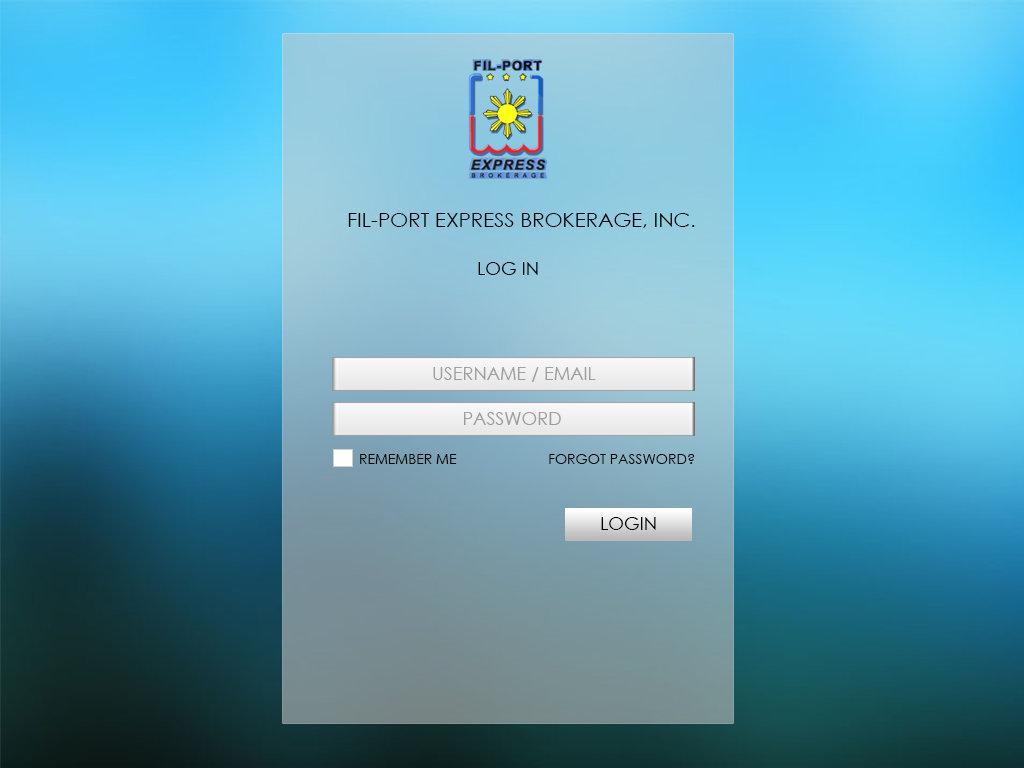
<style>
.page{position:relative;width:1024px;height:768px}
.page>*{position:absolute;margin:0}
.t1{font:20.3px "CenturyGothic";color:#000000;text-transform:uppercase}
.t2{font:18px "CenturyGothic";color:#000000;text-transform:uppercase}
.t3{font:18px "CenturyGothic";color:#9f9f9f;text-transform:uppercase}
.t4{font:18px "CenturyGothic";color:#9d9d9d;text-transform:uppercase}
.t5{font:14px "CenturyGothic";color:#000000;text-transform:uppercase}
</style>
<div class="page">
<p class="t1" style="left:348px;top:213px;width:347px;height:15px">FIL-PORT EXPRESS BROKERAGE, INC.</p>
<p class="t2" style="left:478px;top:262px;width:60px;height:13px">Log in</p>
<p class="t3" style="left:433px;top:367px;width:163px;height:15px">Username / email</p>
<p class="t4" style="left:464px;top:412px;width:97px;height:13px">password</p>
<p class="t5" style="left:360px;top:454px;width:97px;height:10px">Remember me</p>
<p class="t5" style="left:549px;top:454px;width:146px;height:10px">Forgot password?</p>
<p class="t2" style="left:601px;top:517px;width:55px;height:13px">Login</p>
</div>
